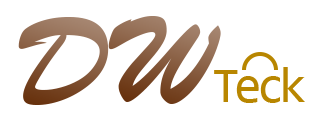
<style>
.page{position:relative;width:317px;height:123px;background:#ffffff}
.page>*{position:absolute;margin:0}
.t1{font:125px "BrushScript-BT"}
</style>
<div class="page">
<p class="t1" style="left:18px;top:17px;width:91px;height:88px">D</p>
<p class="t1" style="left:108px;top:16px;width:113px;height:88px">W</p>
</div>
